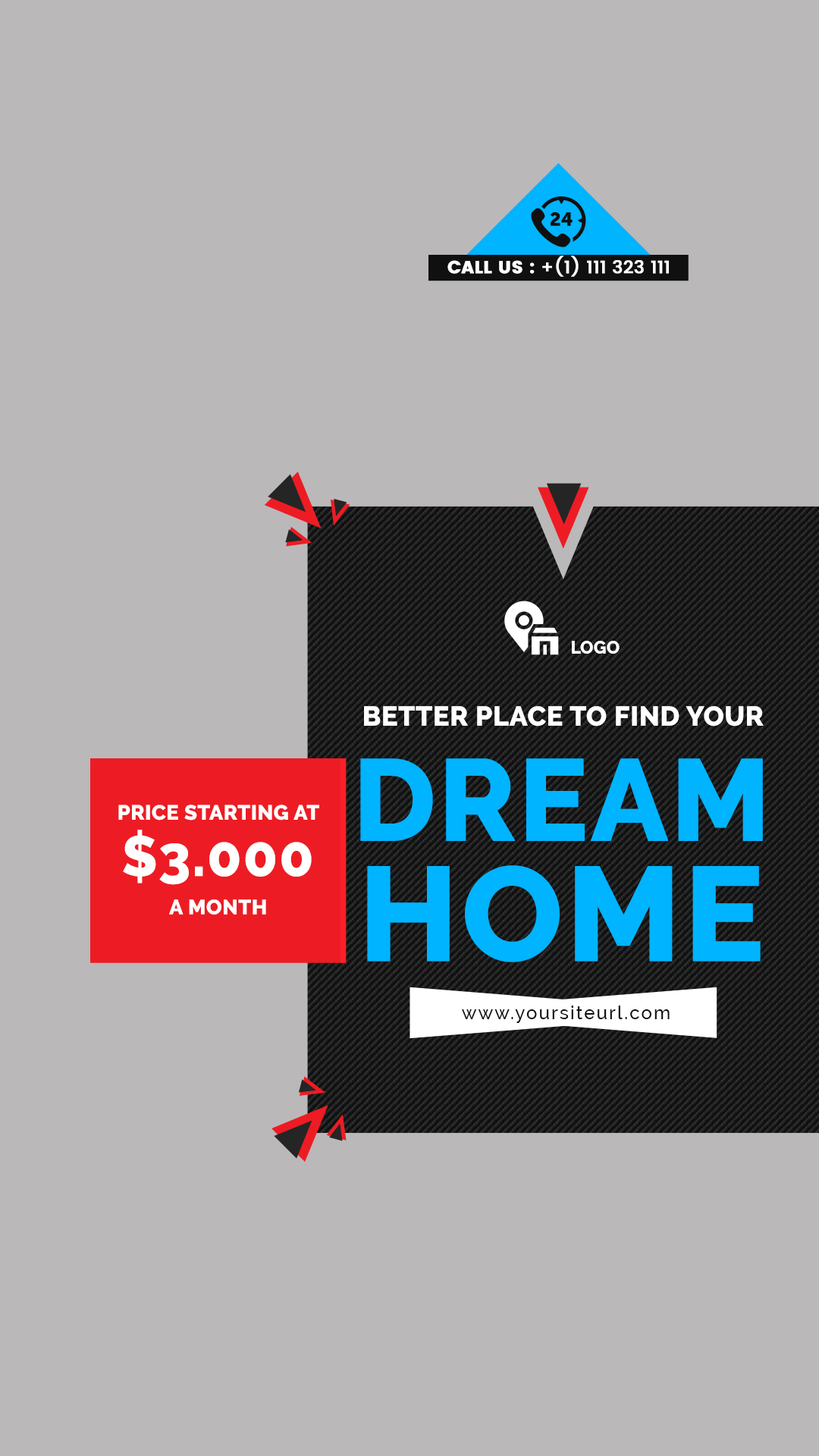
<style>
.page{position:relative;width:819px;height:1456px;background:#bbb8b9}
.page>*{position:absolute;margin:0}
.t1{font:17.6px "Poppins-Medium";color:#ffffff;text-transform:uppercase;font-weight:bold}
.t2{font:17.6px "Poppins";color:#ffffff;text-transform:uppercase;font-weight:bold}
.t3{font:17.9px "Raleway-ExtraBold";color:#ffffff;text-transform:uppercase}
.t4{font:26.8px/81.5px "Raleway-ExtraBold";color:#ffffff;text-transform:uppercase;font-weight:bold}
.t5{font:115.1px/115.1px "Raleway-ExtraBold";color:#00b4ff;text-transform:uppercase;font-weight:bold}
.t6{font:133px/120.2px "Raleway-ExtraBold";color:#00b4ff;text-transform:uppercase;font-weight:bold}
.t7{font:20.5px/56.3px "Raleway-ExtraBold";color:#ffffff;text-transform:uppercase;font-weight:bold}
.t8{font:56.3px/56.3px "Raleway-ExtraBold";color:#ffffff;text-transform:uppercase;font-weight:bold}
.t9{font:20.5px/38.4px "Raleway-ExtraBold";color:#ffffff;text-transform:uppercase;font-weight:bold}
.t10{font:17.9px "Raleway-Medium";letter-spacing:0.1em;color:#101010}
</style>
<div class="page">
<p class="t1" style="left:447px;top:256px;width:222px;height:21px"><span class="t2">call us :</span> +(1) 111 323 111</p>
<p class="t3" style="left:572px;top:641px;width:48px;height:13px">logo</p>
<p class="t4" style="left:360px;top:706px;width:404px;height:256px;text-align:center">better place to find your<br><span class="t5">dream<br></span><span class="t6">home</span></p>
<p class="t7" style="left:118px;top:805px;width:201px;height:110px;text-align:center">price starting at<br><span class="t8">$3.000<br></span><span class="t9">a month</span></p>
<p class="t10" style="left:462px;top:1006px;width:208px;height:17px">www.yoursiteurl.com</p>
</div>
